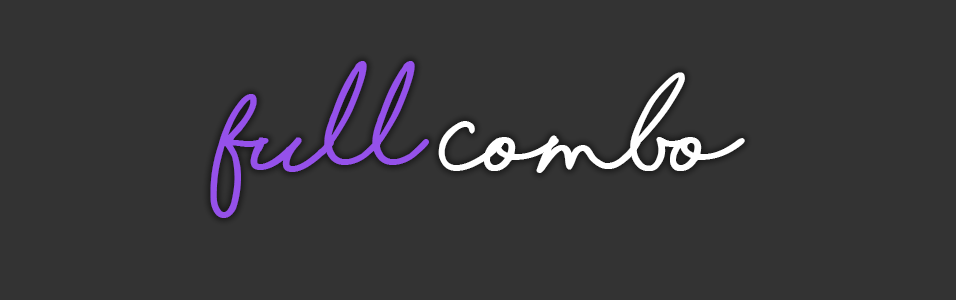
<style>
.page{position:relative;width:956px;height:300px;background:#333333}
.page>*{position:absolute;margin:0}
.t1{font:100px "ShorelinesScriptBold";letter-spacing:-0.04em;color:#ffffff}
.t2{font:100px "ShorelinesScriptBold";letter-spacing:-0.04em;color:#9551ea}
</style>
<div class="page">
<p class="t1" style="left:210px;top:61px;width:535px;height:157px"><span class="t2">Full</span> Combo</p>
</div>
